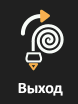
<style>
.page{position:relative;width:78px;height:104px;background:#202020}
.page>*{position:absolute;margin:0}
.t1{font:12px "Calibri-Bold";color:#ffffff}
</style>
<div class="page">
<p class="t1" style="left:18px;top:83px;width:45px;height:13px">Выход</p>
</div>
